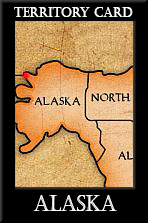
<style>
.page{position:relative;width:148px;height:223px;background:#000000}
.page>*{position:absolute;margin:0}
.t1{font:14px "Castellar";color:#ffffff;scale:0.86 1}
.t2{font:22px "Castellar";color:#ffffff;scale:0.86 1}
</style>
<div class="page">
<p class="t1" style="left:14px;top:7px;width:119px;height:10px">Territory Card</p>
<p class="t2" style="left:33px;top:195px;width:84px;height:16px">ALASKA</p>
</div>
